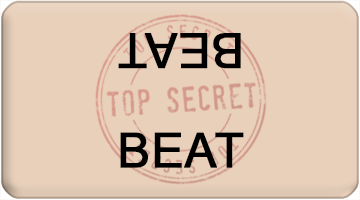
<style>
.page{position:relative;width:360px;height:200px;background:#e8d0bb}
.page>*{position:absolute;margin:0}
.t1{font:48px "ArialMT";color:#000000;font-weight:bold}
</style>
<div class="page">
<p class="t1" style="left:118px;top:33px;width:123px;height:36px;rotate:180deg">BEAT</p>
<p class="t1" style="left:120px;top:132px;width:124px;height:36px">BEAT</p>
</div>
